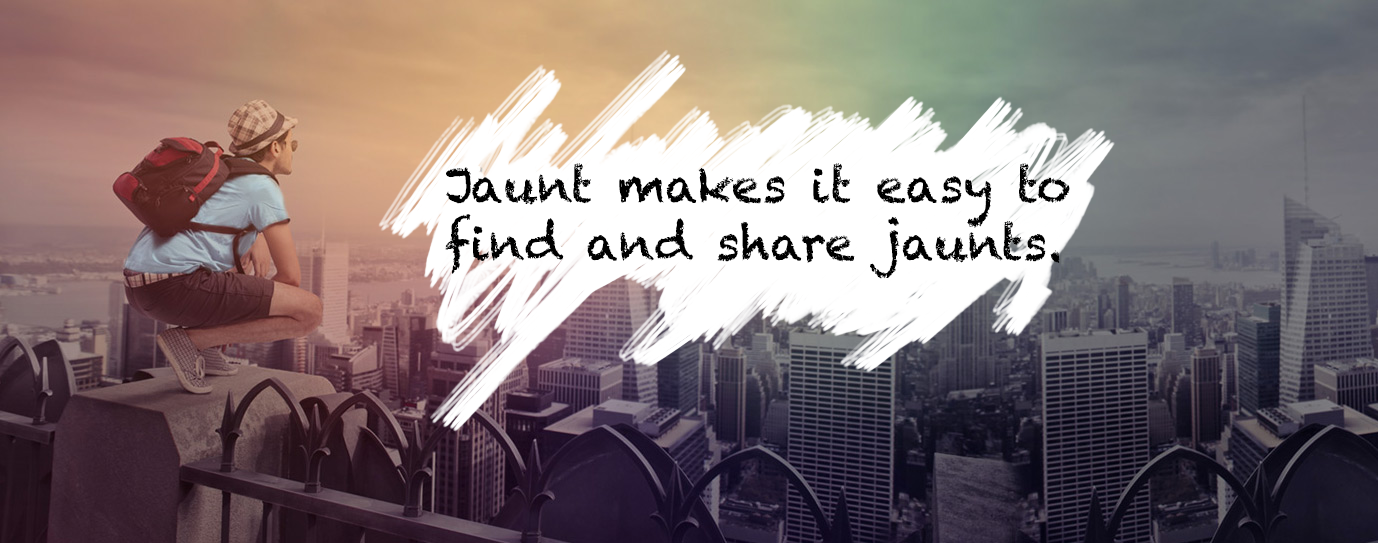
<style>
.page{position:relative;width:1378px;height:543px}
.page>*{position:absolute;margin:0}
.t1{font:48px "Chalkduster";color:#000000}
</style>
<div class="page">
<p class="t1" style="left:445px;top:163px;width:625px;height:116px">Jaunt makes it easy to find and share jaunts.</p>
</div>
